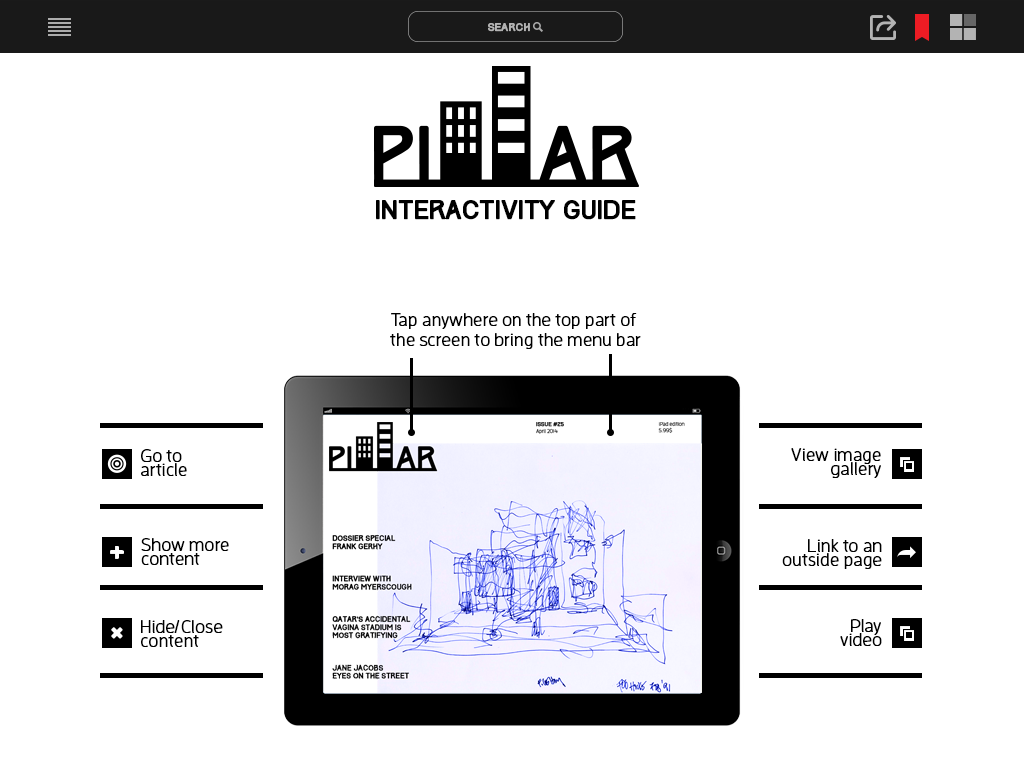
<style>
.page{position:relative;width:1024px;height:768px;background:#ffffff}
.page>*{position:absolute;margin:0}
.t1{font:10px "Track";letter-spacing:-0.01em;color:#b3b3b3;font-weight:bold}
.t2{font:23px "Track";letter-spacing:-0.01em;color:#000000;font-weight:bold}
.t3{font:18px/20px "EnzoOT-Light";color:#000000;font-weight:bold}
.t4{font:18px/14px "EnzoOT-Light";color:#000000;font-weight:bold}
</style>
<div class="page">
<p class="t1" style="left:488px;top:23px;width:42px;height:9px">SEARCH</p>
<p class="t2" style="left:376px;top:200px;width:260px;height:20px">INTERACTIVITY GUIDE</p>
<p class="t3" style="left:390px;top:313px;width:251px;height:36px;text-align:center">Tap anywhere on the top part of <br>the screen to bring the menu bar</p>
<p class="t4" style="left:141px;top:449px;width:46px;height:27px">Go to <br>article</p>
<p class="t4" style="left:791px;top:448px;width:90px;height:30px;text-align:right">View image<br>gallery</p>
<p class="t4" style="left:141px;top:538px;width:88px;height:27px">Show more <br>content</p>
<p class="t4" style="left:782px;top:539px;width:100px;height:30px;text-align:right">Link to an<br>outside page</p>
<p class="t4" style="left:141px;top:620px;width:82px;height:27px">Hide/Close<br>content</p>
<p class="t4" style="left:840px;top:619px;width:42px;height:27px;text-align:right">Play<br>video</p>
</div>
